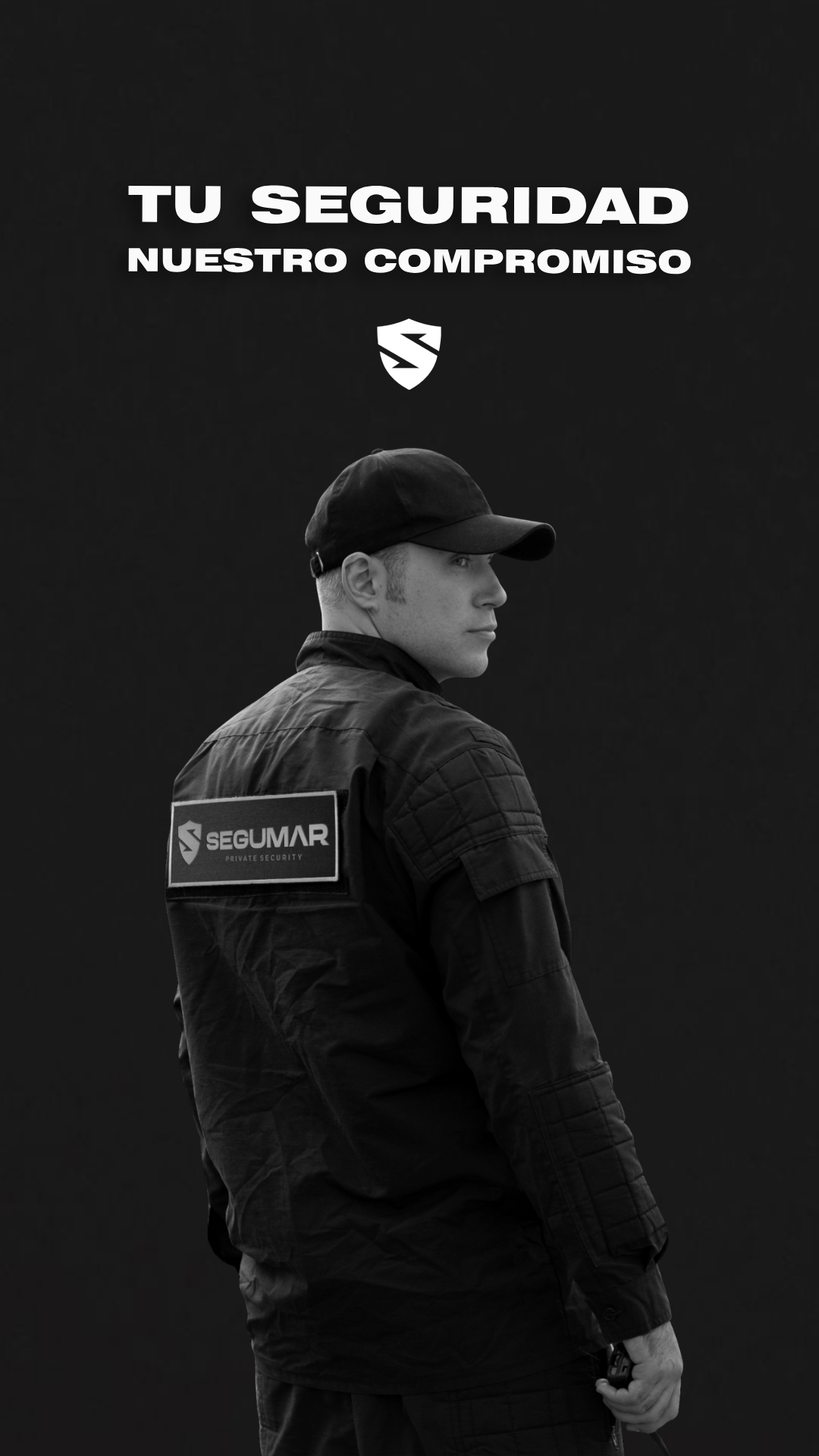
<style>
.page{position:relative;width:819px;height:1456px;background:#191919}
.page>*{position:absolute;margin:0}
.t1{font:31.9px "Swiss721BT-BlackExtended";color:#fafafa;text-transform:uppercase}
.t2{font:49.9px "Swiss721BT-BlackExtended";color:#fafafa;text-transform:uppercase;scale:1.06 1}
</style>
<div class="page">
<p class="t1" style="left:128px;top:185px;width:563px;height:90px;text-align:center"><span class="t2">TU SEGURIDAD<br></span>NUESTRO COMPROMISO</p>
</div>
